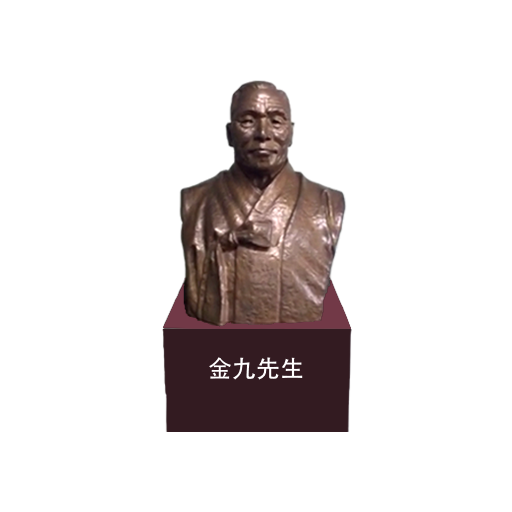
<style>
.page{position:relative;width:512px;height:512px;background:#ffffff}
.page>*{position:absolute;margin:0}
.t1{font:24px "STHeitiTC-Medium";color:#ffffff}
</style>
<div class="page">
<p class="t1" style="left:209px;top:357px;width:94px;height:23px">金九先生</p>
</div>
